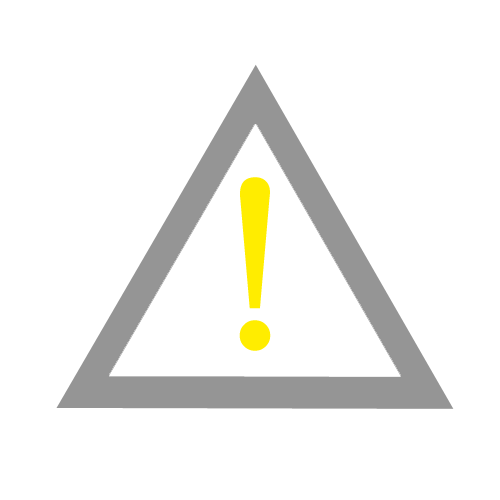
<style>
.page{position:relative;width:500px;height:500px;background:#ffffff}
.page>*{position:absolute;margin:0}
.t1{font:247.5px "BookmanOldStyle";color:#ffed00}
</style>
<div class="page">
<p class="t1" style="left:239px;top:177px;width:32px;height:174px">!</p>
</div>
